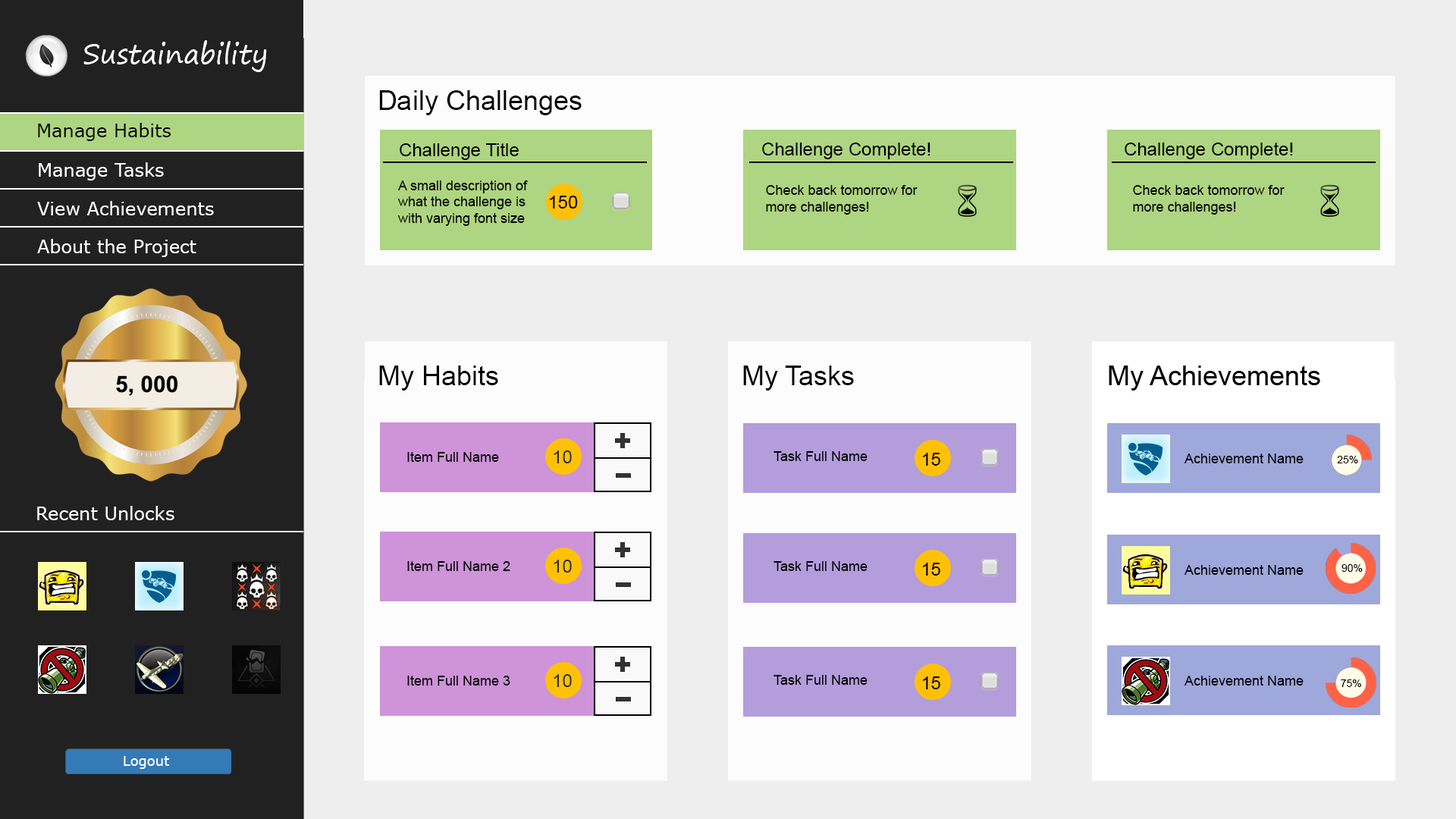
<style>
.page{position:relative;width:1456px;height:819px;background:#eeeeee}
.page>*{position:absolute;margin:0}
.t1{font:27.3px "SegoePrint";color:#ffffff}
.t2{font:27.3px "ArialMT";color:#030303}
.t3{font:18.2px "Verdana";color:#000000}
.t4{font:18.2px "ArialMT";color:#000000}
.t5{font:18.2px "Verdana";color:#ffffff}
.t6{font:13.6px "ArialMT";color:#000000}
.t7{font:27.3px "ArialMT";color:#000000}
.t8{font:22.7px "Arial-BoldMT";color:#000000}
.t9{font:18.2px "ArialMT";color:#333333}
.t10{font:10.6px "ArialMT";color:#000000}
.t11{font:13.6px "Verdana";color:#ffffff}
</style>
<div class="page">
<p class="t1" style="left:83px;top:40px;width:184px;height:32px">Sustainability</p>
<p class="t2" style="left:379px;top:90px;width:203px;height:25px">Daily Challenges</p>
<p class="t3" style="left:38px;top:123px;width:133px;height:18px">Manage Habits</p>
<p class="t4" style="left:400px;top:143px;width:119px;height:17px">Challenge Title</p>
<p class="t4" style="left:762px;top:142px;width:168px;height:17px">Challenge Complete!</p>
<p class="t4" style="left:1125px;top:142px;width:168px;height:17px">Challenge Complete!</p>
<p class="t5" style="left:39px;top:162px;width:125px;height:18px">Manage Tasks</p>
<p class="t6" style="left:397px;top:180px;width:131px;height:46px">A small description of<br>what the challenge is<br>with varying font size</p>
<p class="t6" style="left:766px;top:185px;width:152px;height:30px">Check back tomorrow for<br>more challenges!</p>
<p class="t6" style="left:1133px;top:185px;width:152px;height:30px">Check back tomorrow for<br>more challenges!</p>
<p class="t4" style="left:550px;top:196px;width:28px;height:13px">150</p>
<p class="t5" style="left:37px;top:201px;width:177px;height:14px">View Achievements</p>
<p class="t5" style="left:37px;top:239px;width:159px;height:18px">About the Project</p>
<p class="t7" style="left:379px;top:366px;width:119px;height:25px">My Habits</p>
<p class="t7" style="left:743px;top:366px;width:111px;height:25px">My Tasks</p>
<p class="t8" style="left:116px;top:375px;width:61px;height:21px">5, 000</p>
<p class="t6" style="left:407px;top:452px;width:92px;height:10px">Item Full Name</p>
<p class="t9" style="left:554px;top:450px;width:18px;height:13px">10</p>
<p class="t6" style="left:773px;top:451px;width:95px;height:10px">Task Full Name</p>
<p class="t4" style="left:923px;top:453px;width:17px;height:13px">15</p>
<p class="t6" style="left:1184px;top:453px;width:120px;height:10px">Achievement Name</p>
<p class="t10" style="left:1337px;top:456px;width:21px;height:7px">25%</p>
<p class="t5" style="left:37px;top:506px;width:137px;height:14px">Recent Unlocks</p>
<p class="t6" style="left:407px;top:561px;width:103px;height:10px">Item Full Name 2</p>
<p class="t9" style="left:554px;top:560px;width:18px;height:13px">10</p>
<p class="t6" style="left:773px;top:561px;width:95px;height:10px">Task Full Name</p>
<p class="t4" style="left:923px;top:563px;width:17px;height:13px">15</p>
<p class="t6" style="left:1184px;top:565px;width:120px;height:10px">Achievement Name</p>
<p class="t10" style="left:1341px;top:564px;width:22px;height:8px">90%</p>
<p class="t6" style="left:407px;top:676px;width:103px;height:10px">Item Full Name 3</p>
<p class="t9" style="left:554px;top:674px;width:18px;height:13px">10</p>
<p class="t6" style="left:773px;top:675px;width:95px;height:10px">Task Full Name</p>
<p class="t4" style="left:923px;top:676px;width:17px;height:13px">15</p>
<p class="t6" style="left:1184px;top:676px;width:120px;height:10px">Achievement Name</p>
<p class="t10" style="left:1341px;top:679px;width:20px;height:8px">75%</p>
<p class="t11" style="left:124px;top:756px;width:46px;height:13px">Logout</p>
</div>
